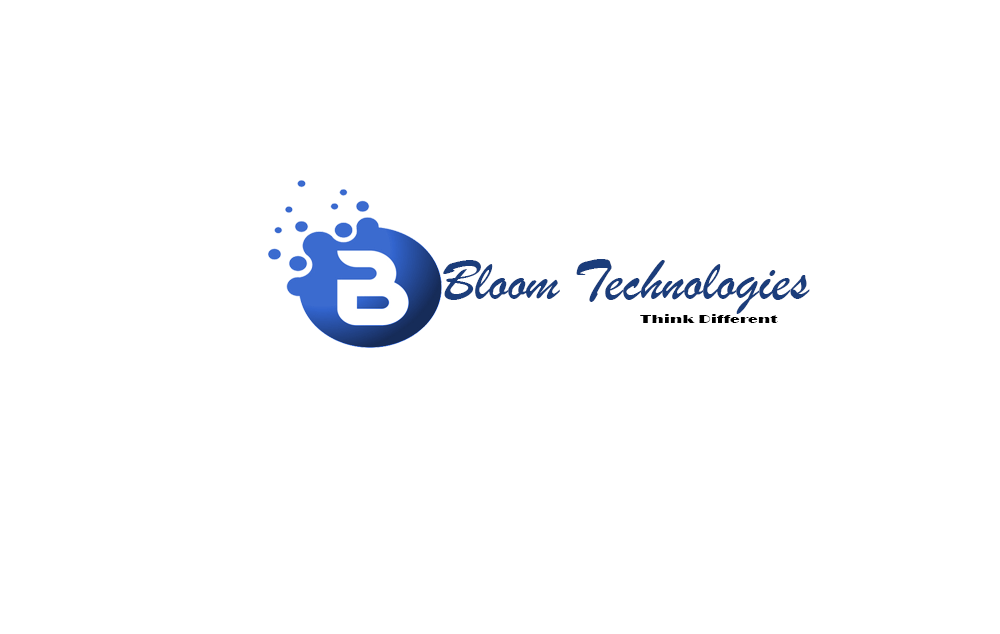
<style>
.page{position:relative;width:1000px;height:634px;background:#ffffff}
.page>*{position:absolute;margin:0}
.t1{font:60px "BrushScriptMT";color:#1b3d7b}
.t2{font:12.2px "Broadway";color:#000000;scale:1.35 1}
</style>
<div class="page">
<p class="t1" style="left:443px;top:259px;width:367px;height:55px">Bloom Technologies</p>
<p class="t2" style="left:640px;top:314px;width:138px;height:9px">Think Different</p>
</div>
